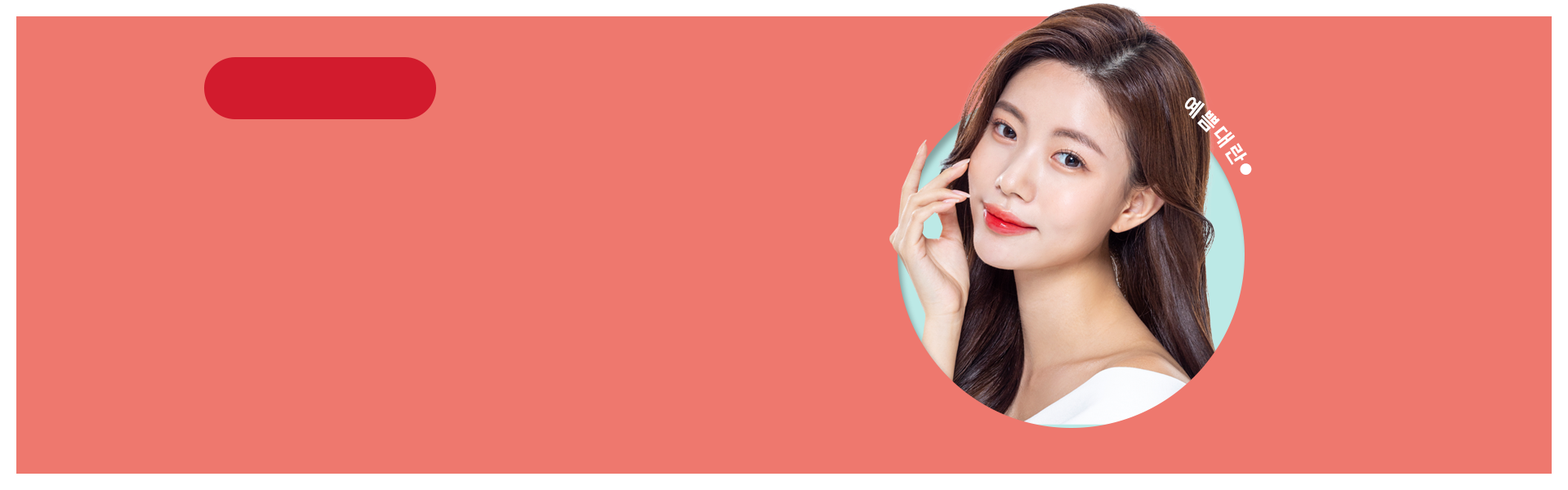
<style>
.page{position:relative;width:1568px;height:490px;background:#ee786e}
.page>*{position:absolute;margin:0}
.t1{font:20.4px/74.3px "NotoSansKR-Bold";letter-spacing:-0.07em;color:#ffffff}
.t2{font:12.2px/74.3px "NotoSansKR-Bold";letter-spacing:-0.07em;color:#ffffff}
</style>
<div class="page">
<p class="t1" style="left:1185px;top:97px;width:67px;height:78px">예 쁨 대 란 <span class="t2">●</span></p>
</div>
